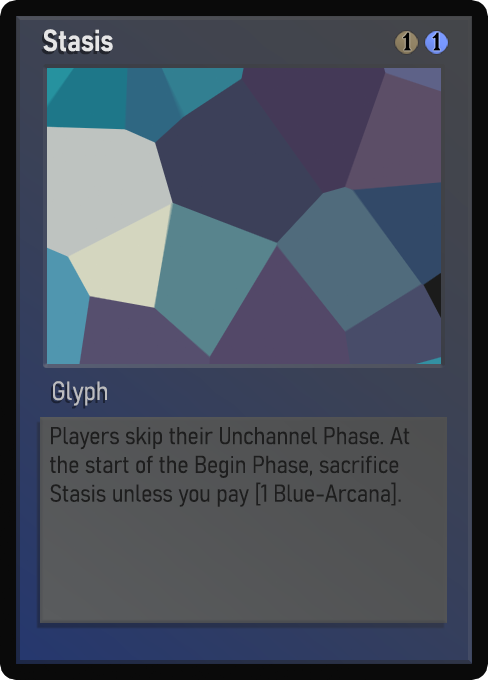
<style>
.page{position:relative;width:488px;height:680px}
.page>*{position:absolute;margin:0}
.t1{font:30px "Bahnschrift-SemiBoldSemiCondensed";color:#f2f2f2;font-weight:bold}
.t2{font:25px "WTRRoycroft";color:#000000;font-weight:bold;scale:1.09 1}
.t3{font:26px "Bahnschrift-LightSemiCondensed";color:#c8c8c8;font-weight:bold}
.t4{font:24px "Bahnschrift-LightSemiCondensed";color:#1e1e1e;font-weight:bold}
</style>
<div class="page">
<p class="t1" style="left:43px;top:29px;width:70px;height:23px;opacity:0.9">Stasis</p>
<p class="t2" style="left:403px;top:32px;width:8px;height:19px">1</p>
<p class="t2" style="left:432px;top:32px;width:9px;height:19px">1</p>
<p class="t3" style="left:53px;top:381px;width:54px;height:25px;opacity:0.9">Glyph</p>
<p class="t4" style="left:50px;top:427px;width:360px;height:80px">Players skip their Unchannel Phase. At the start of the Begin Phase, sacrifice Stasis unless you pay [1 Blue-Arcana].</p>
</div>
